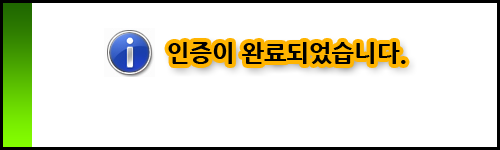
<style>
.page{position:relative;width:500px;height:150px;background:#ffffff}
.page>*{position:absolute;margin:0}
.t1{font:24px "NanumGothicExtraBold";color:#000000}
</style>
<div class="page">
<p class="t1" style="left:168px;top:42px;width:238px;height:22px">인증이 완료되었습니다.</p>
</div>
